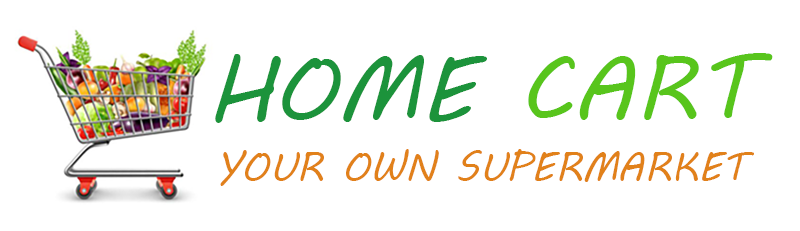
<style>
.page{position:relative;width:800px;height:231px;background:#ffffff}
.page>*{position:absolute;margin:0}
.t1{font:21.6px "MVBoli";color:#1c933b}
.t2{font:21.6px "MVBoli";color:#58c51c}
.t3{font:9.6px "MVBoli";color:#e1811a;scale:0.97 1}
</style>
<div class="page">
<p class="t1" style="left:215px;top:53px;width:558px;height:70px">HOME <span class="t2">CART</span></p>
<p class="t3" style="left:220px;top:149px;width:534px;height:37px">YOUR OWN SUPERMARKET</p>
</div>
